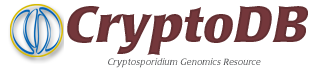
<style>
.page{position:relative;width:320px;height:70px;background:#ffffff}
.page>*{position:absolute;margin:0}
.t1{font:50.2px "PopplLaudatio-Bold";letter-spacing:0.013em;color:#6f3539;font-style:italic}
</style>
<div class="page">
<p class="t1" style="left:67px;top:6px;width:241px;height:49px">CryptoDB</p>
</div>
